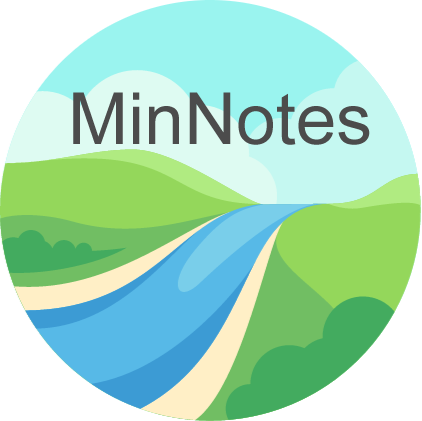
<style>
.page{position:relative;width:422px;height:421px;background:#ffffff}
.page>*{position:absolute;margin:0}
.t1{font:72px "ArialMT";color:#4c4c4c}
</style>
<div class="page">
<p class="t1" style="left:73px;top:92px;width:297px;height:53px">MinNotes</p>
</div>
